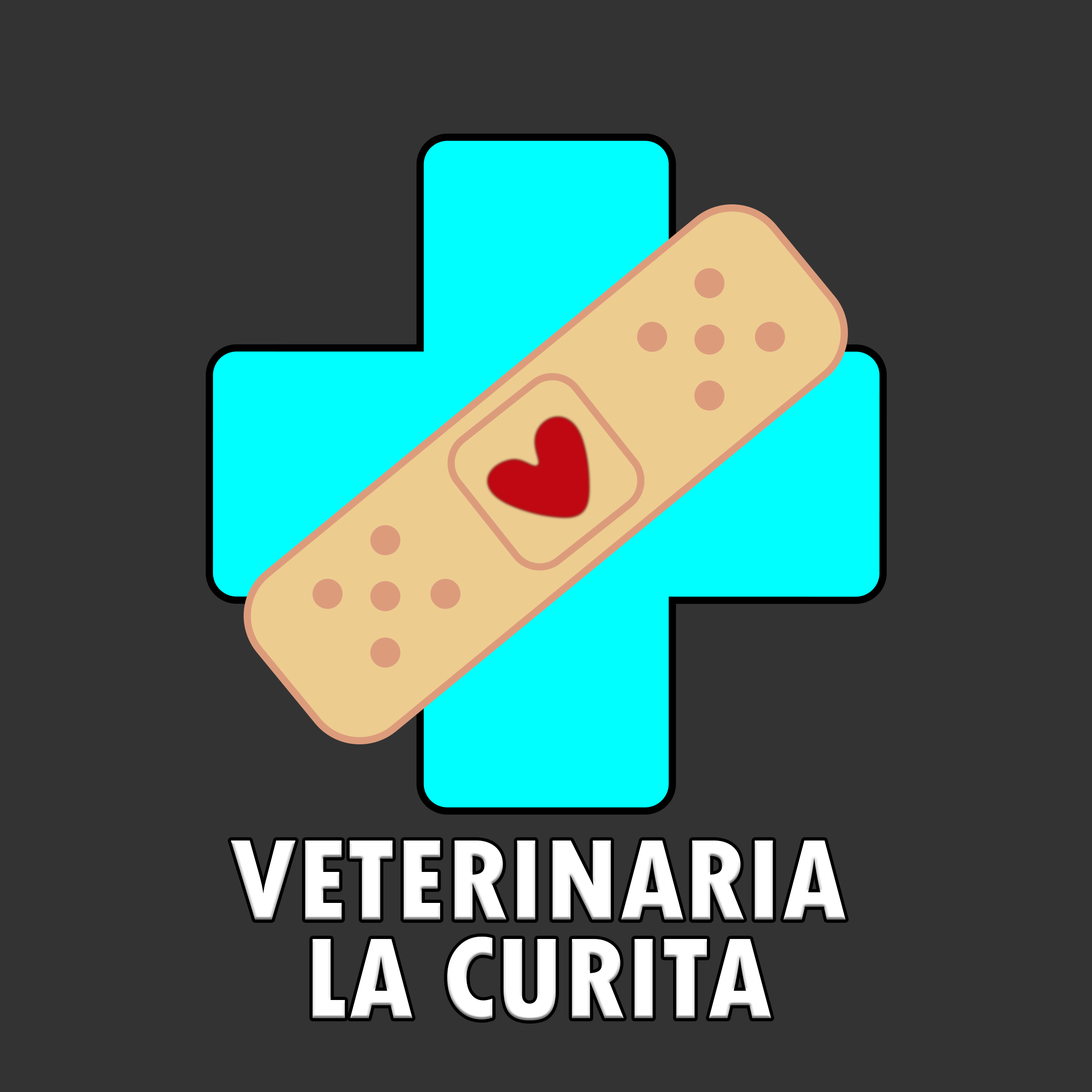
<style>
.page{position:relative;width:1092px;height:1092px;background:#333333}
.page>*{position:absolute;margin:0}
.t1{font:121.4px/98.2px "TwCenMT-CondensedExtraBold";color:#ffffff}
</style>
<div class="page">
<p class="t1" style="left:231px;top:840px;width:615px;height:180px;text-align:center">VETERINARIA <br>LA CURITA</p>
</div>
